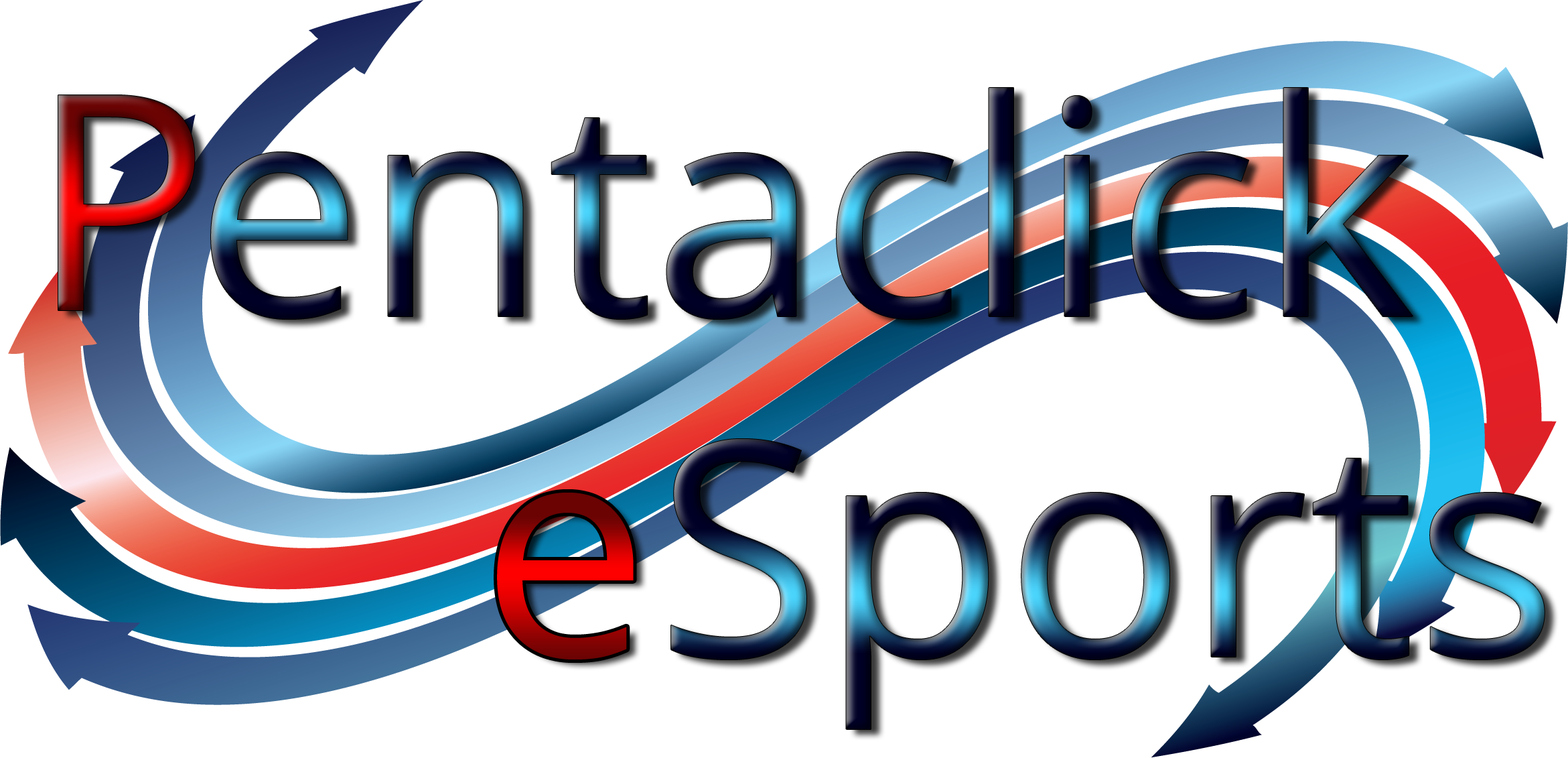
<style>
.page{position:relative;width:1568px;height:758px;background:#ffffff}
.page>*{position:absolute;margin:0}
.t1{font:300.4px "OpenSans"}
</style>
<div class="page">
<p class="t1" style="left:211px;top:88px;width:1202px;height:231px">entaclick</p>
<p class="t1" style="left:58px;top:95px;width:137px;height:215px">P</p>
<p class="t1" style="left:671px;top:439px;width:874px;height:290px">Sports</p>
<p class="t1" style="left:497px;top:492px;width:137px;height:167px">e</p>
</div>
